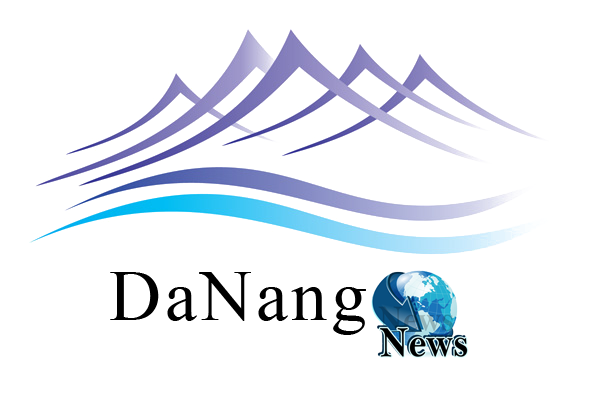
<style>
.page{position:relative;width:600px;height:400px;background:#ffffff}
.page>*{position:absolute;margin:0}
.t1{font:72px "TimesNewRomanPSMT";letter-spacing:0.05em;color:#000000}
</style>
<div class="page">
<p class="t1" style="left:110px;top:272px;width:256px;height:63px">DaNang</p>
</div>
